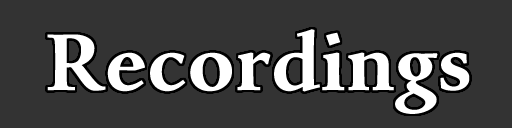
<style>
.page{position:relative;width:512px;height:128px;background:#333333}
.page>*{position:absolute;margin:0}
.t1{font:85px "Pescadero-Bold";color:#ffffff}
</style>
<div class="page">
<p class="t1" style="left:47px;top:29px;width:423px;height:85px">Recordings</p>
</div>
